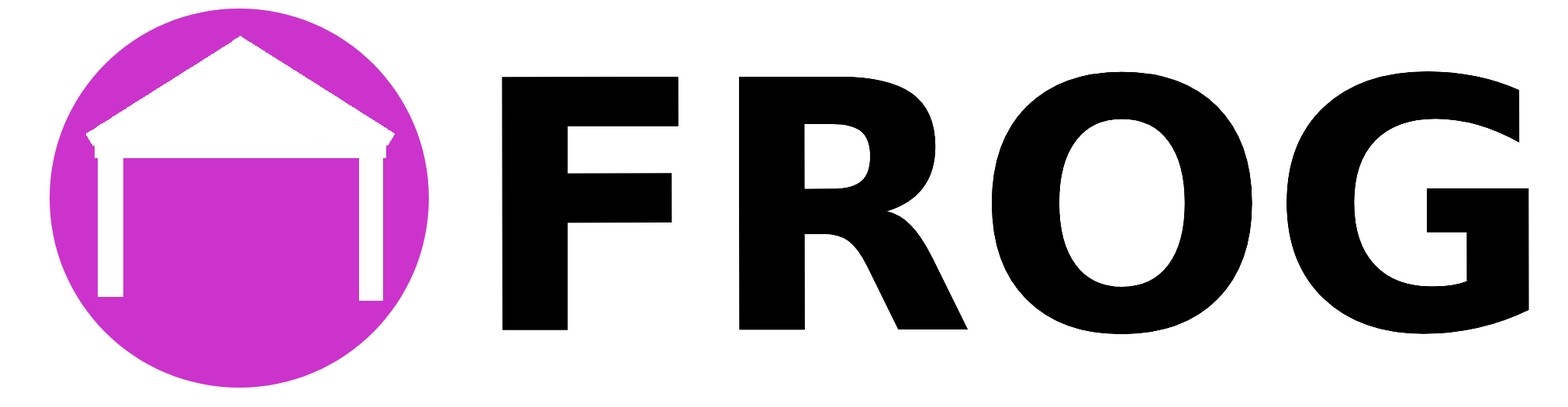
<style>
.page{position:relative;width:1568px;height:407px;background:#ffffff}
.page>*{position:absolute;margin:0}
.t1{font:346.9px "DejaVuSans-Bold";color:#000000}
</style>
<div class="page">
<p class="t1" style="left:502px;top:71px;width:1027px;height:263px">FROG</p>
</div>
